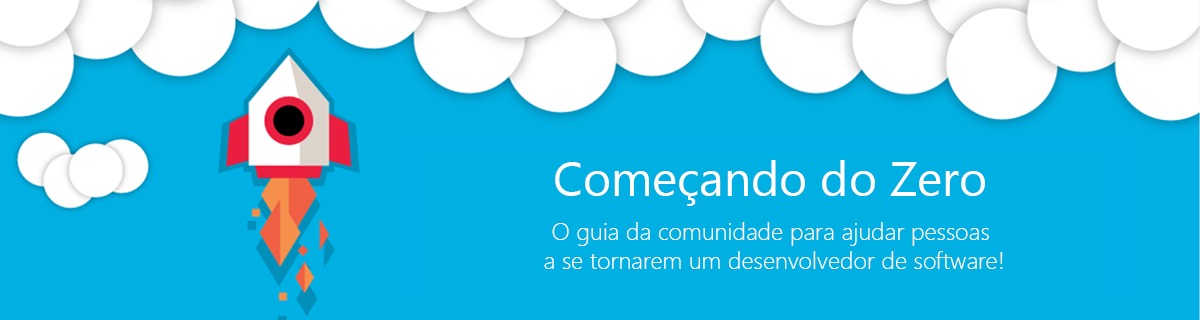
<style>
.page{position:relative;width:1200px;height:320px;background:#01b0e3}
.page>*{position:absolute;margin:0}
.t1{font:48px "SegoeUI";color:#ffffff}
.t2{font:24px "SegoeUI-Light";color:#ffffff}
</style>
<div class="page">
<p class="t1" style="left:555px;top:160px;width:430px;height:46px">Começando do Zero</p>
<p class="t2" style="left:544px;top:222px;width:459px;height:47px;text-align:center">O guia da comunidade para ajudar pessoas <br>a se tornarem um desenvolvedor de software!</p>
</div>
